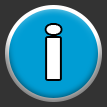
<style>
.page{position:relative;width:107px;height:107px;background:#333333}
.page>*{position:absolute;margin:0}
.t1{font:72px "Oddlini-ExtraBold";color:#ffffff}
</style>
<div class="page">
<p class="t1" style="left:46px;top:25px;width:15px;height:54px">i</p>
</div>
